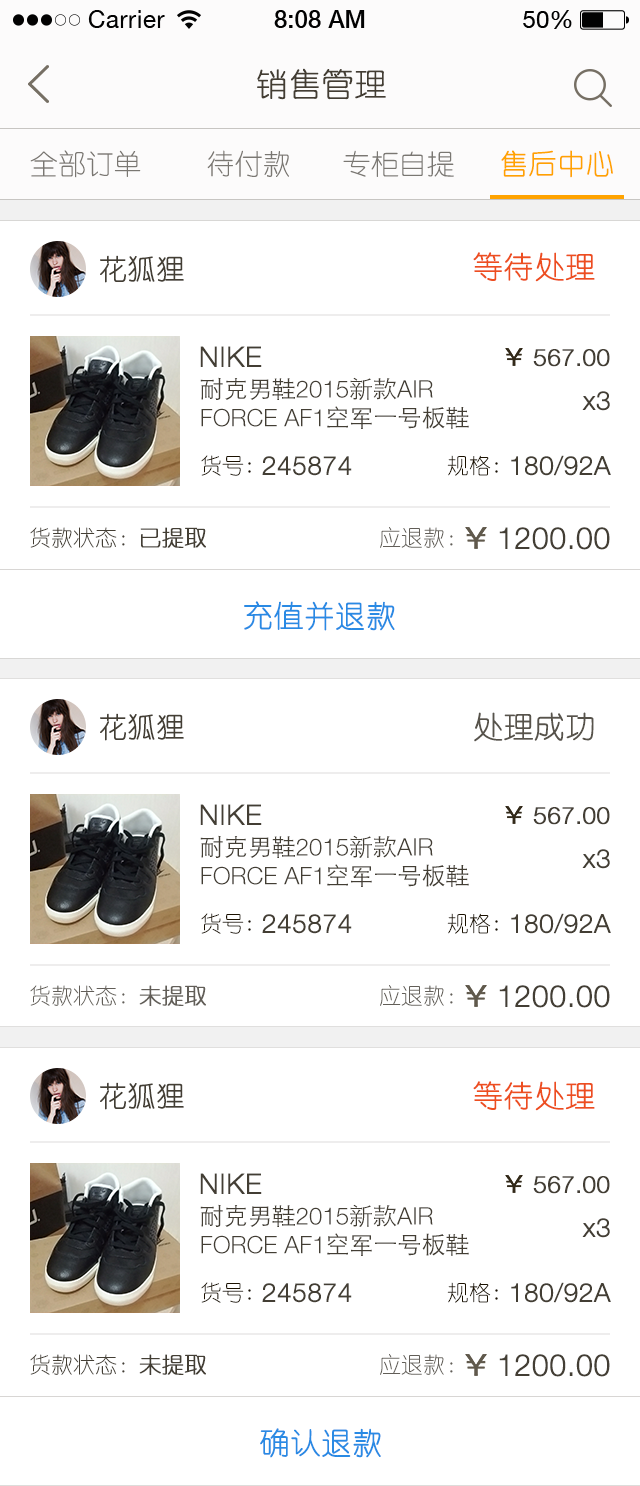
<style>
.page{position:relative;width:640px;height:1486px;background:#ffffff}
.page>*{position:absolute;margin:0}
.t1{font:32px "YouYuan";color:#433d33;text-transform:uppercase;font-weight:bold}
.t2{font:28px "YouYuan";color:#7a7772;text-transform:uppercase}
.t3{font:28px "YouYuan";color:#ffa300;text-transform:uppercase;font-weight:bold}
.t4{font:28px "YouYuan";color:#433e34;text-transform:uppercase;font-weight:bold}
.t5{font:30px "YouYuan";color:#ed4e1f;text-transform:uppercase;font-weight:bold}
.t6{font:28px "HelveticaNeueLTPro-Lt";color:#433e34;text-transform:uppercase;font-weight:bold}
.t7{font:24px "HelveticaNeueLTPro-Lt";color:#433e34;text-transform:uppercase;font-weight:bold}
.t8{font:24px "HelveticaNeueLTPro-Lt";color:#433e34;text-transform:uppercase}
.t9{font:24px "STHeitiSC-Light";color:#433e34;text-transform:uppercase}
.t10{font:26px "HelveticaNeueLTPro-Lt";color:#433e34;font-weight:bold}
.t11{font:22px "YouYuan";color:#1b1100;text-transform:uppercase}
.t12{font:26px "HelveticaNeueLTPro-Lt";color:#433e34;text-transform:uppercase;font-weight:bold}
.t13{font:22px "YouYuan";color:#433e34;text-transform:uppercase}
.t14{font:22px "YouYuan";color:#433e34;text-transform:uppercase;font-weight:bold}
.t15{font:22px "YouYuan";color:#625e58;text-transform:uppercase}
.t16{font:30px "HelveticaNeueLTPro-Lt";color:#433e34;text-transform:uppercase;font-weight:bold}
.t17{font:30px "YouYuan";color:#298ae4;text-transform:uppercase;font-weight:bold}
.t18{font:30px "YouYuan";color:#57534b;text-transform:uppercase;font-weight:bold}
.t19{font:22px "YouYuan";color:#625e58;text-transform:uppercase;font-weight:bold}
</style>
<div class="page">
<p class="t1" style="left:257px;top:68px;width:129px;height:32px">销售管理</p>
<p class="t2" style="left:30px;top:150px;width:111px;height:28px">全部订单</p>
<p class="t2" style="left:207px;top:150px;width:82px;height:27px">待付款</p>
<p class="t2" style="left:343px;top:150px;width:111px;height:27px">专柜自提</p>
<p class="t3" style="left:501px;top:150px;width:112px;height:28px">售后中心</p>
<p class="t4" style="left:100px;top:255px;width:84px;height:28px">花狐狸</p>
<p class="t5" style="left:473px;top:252px;width:122px;height:30px">等待处理</p>
<p class="t6" style="left:200px;top:346px;width:62px;height:21px">NIKE</p>
<p class="t7" style="left:533px;top:349px;width:77px;height:18px">567.00</p>
<p class="t8" style="left:200px;top:377px;width:269px;height:52px"><span class="t9">耐克男鞋</span>2015<span class="t9">新款</span>air force AF1<span class="t9">空军一号板鞋</span></p>
<p class="t10" style="left:582px;top:391px;width:28px;height:20px">x3</p>
<p class="t11" style="left:201px;top:455px;width:50px;height:21px">货号:</p>
<p class="t12" style="left:262px;top:456px;width:90px;height:20px">245874</p>
<p class="t11" style="left:447px;top:455px;width:51px;height:21px">规格:</p>
<p class="t12" style="left:511px;top:455px;width:100px;height:21px">180/92a</p>
<p class="t13" style="left:30px;top:527px;width:176px;height:21px">货款状态：<span class="t14">已提取</span></p>
<p class="t15" style="left:380px;top:527px;width:73px;height:21px">应退款：</p>
<p class="t16" style="left:499px;top:527px;width:111px;height:23px">1200.00</p>
<p class="t17" style="left:244px;top:601px;width:151px;height:30px">充值并退款</p>
<p class="t4" style="left:100px;top:713px;width:84px;height:28px">花狐狸</p>
<p class="t18" style="left:474px;top:712px;width:120px;height:30px">处理成功</p>
<p class="t6" style="left:200px;top:804px;width:62px;height:21px">NIKE</p>
<p class="t7" style="left:533px;top:807px;width:77px;height:18px">567.00</p>
<p class="t8" style="left:200px;top:835px;width:269px;height:52px"><span class="t9">耐克男鞋</span>2015<span class="t9">新款</span>air force AF1<span class="t9">空军一号板鞋</span></p>
<p class="t10" style="left:582px;top:849px;width:28px;height:20px">x3</p>
<p class="t11" style="left:201px;top:913px;width:50px;height:21px">货号:</p>
<p class="t12" style="left:262px;top:914px;width:90px;height:20px">245874</p>
<p class="t11" style="left:447px;top:913px;width:51px;height:21px">规格:</p>
<p class="t12" style="left:511px;top:913px;width:100px;height:21px">180/92a</p>
<p class="t15" style="left:30px;top:985px;width:176px;height:21px">货款状态：<span class="t19">未提取</span></p>
<p class="t15" style="left:380px;top:985px;width:73px;height:21px">应退款：</p>
<p class="t16" style="left:499px;top:985px;width:111px;height:23px">1200.00</p>
<p class="t4" style="left:100px;top:1082px;width:84px;height:28px">花狐狸</p>
<p class="t5" style="left:473px;top:1081px;width:122px;height:30px">等待处理</p>
<p class="t6" style="left:200px;top:1173px;width:62px;height:21px">NIKE</p>
<p class="t7" style="left:533px;top:1176px;width:77px;height:18px">567.00</p>
<p class="t8" style="left:200px;top:1204px;width:269px;height:52px"><span class="t9">耐克男鞋</span>2015<span class="t9">新款</span>air force AF1<span class="t9">空军一号板鞋</span></p>
<p class="t10" style="left:582px;top:1218px;width:28px;height:20px">x3</p>
<p class="t11" style="left:201px;top:1282px;width:50px;height:21px">货号:</p>
<p class="t12" style="left:262px;top:1283px;width:90px;height:20px">245874</p>
<p class="t11" style="left:447px;top:1282px;width:51px;height:21px">规格:</p>
<p class="t12" style="left:511px;top:1282px;width:100px;height:21px">180/92a</p>
<p class="t13" style="left:30px;top:1354px;width:176px;height:21px">货款状态：<span class="t14">未提取</span></p>
<p class="t15" style="left:380px;top:1354px;width:73px;height:21px">应退款：</p>
<p class="t16" style="left:499px;top:1354px;width:111px;height:23px">1200.00</p>
<p class="t17" style="left:260px;top:1428px;width:121px;height:30px">确认退款</p>
</div>
